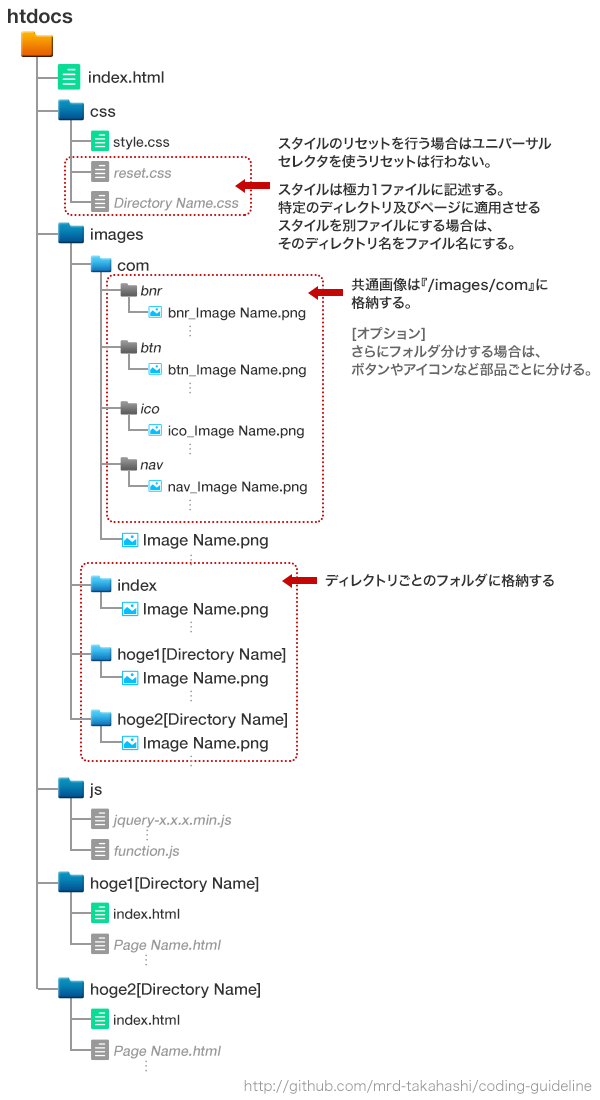
<style>
.page{position:relative;width:600px;height:1100px;background:#ffffff}
.page>*{position:absolute;margin:0}
.t1{font:20px "HelveticaNeue-Bold";color:#333333}
.t2{font:16px "HelveticaNeue-Medium";color:#333333}
.t3{font:14px "HelveticaNeue-Medium";color:#333333}
.t4{font:14px/18px "HiraKakuPro-W6";color:#333333}
.t5{font:14px "HelveticaNeue-Medium";color:#999999;font-style:italic}
.t6{font:14px "HelveticaNeue-Medium";color:#333333;font-style:italic}
.t7{font:14px "HiraKakuPro-W3";color:#999999}
.t8{font:14px/18px "HiraKakuPro-W6";color:#666666}
.t9{font:14px "HiraKakuPro-W6";color:#333333}
</style>
<div class="page">
<p class="t1" style="left:8px;top:8px;width:65px;height:16px">htdocs</p>
<p class="t2" style="left:89px;top:71px;width:75px;height:12px">index.html</p>
<p class="t2" style="left:90px;top:108px;width:26px;height:9px">css</p>
<p class="t3" style="left:113px;top:136px;width:57px;height:14px">style.css</p>
<p class="t4" style="left:278px;top:137px;width:274px;height:31px">スタイルのリセットを行う場合はユニバーサル<br>セレクタを使うリセットは行わない。</p>
<p class="t5" style="left:114px;top:168px;width:58px;height:10px">reset.css</p>
<p class="t4" style="left:278px;top:183px;width:262px;height:67px">スタイルは極力1ファイルに記述する。<br>特定のディレクトリ及びページに適用させる<br>スタイルを別ファイルにする場合は、<br>そのディレクトリ名をファイル名にする。</p>
<p class="t5" style="left:114px;top:197px;width:125px;height:14px">Directory Name.css</p>
<p class="t2" style="left:91px;top:228px;width:52px;height:15px">images</p>
<p class="t2" style="left:117px;top:262px;width:32px;height:9px">com</p>
<p class="t4" style="left:351px;top:277px;width:197px;height:32px">共通画像は『/images/com』に<br>格納する。</p>
<p class="t6" style="left:140px;top:285px;width:23px;height:11px">bnr</p>
<p class="t3" style="left:168px;top:307px;width:138px;height:14px">bnr_Image Name.png</p>
<p class="t7" style="left:189px;top:325px;width:2px;height:12px">…</p>
<p class="t8" style="left:351px;top:327px;width:240px;height:49px">[オプション]<br>さらにフォルダ分けする場合は、<br>ボタンやアイコンなど部品ごとに分ける。</p>
<p class="t6" style="left:140px;top:342px;width:21px;height:11px">btn</p>
<p class="t3" style="left:168px;top:364px;width:138px;height:14px">btn_Image Name.png</p>
<p class="t7" style="left:189px;top:382px;width:2px;height:12px">…</p>
<p class="t6" style="left:140px;top:403px;width:20px;height:11px">ico</p>
<p class="t3" style="left:168px;top:425px;width:136px;height:14px">ico_Image Name.png</p>
<p class="t7" style="left:189px;top:443px;width:2px;height:12px">…</p>
<p class="t6" style="left:140px;top:462px;width:24px;height:8px">nav</p>
<p class="t3" style="left:168px;top:481px;width:139px;height:14px">nav_Image Name.png</p>
<p class="t7" style="left:189px;top:499px;width:2px;height:12px">…</p>
<p class="t2" style="left:144px;top:534px;width:124px;height:15px">Image Name.png</p>
<p class="t7" style="left:190px;top:554px;width:2px;height:12px">…</p>
<p class="t2" style="left:118px;top:579px;width:39px;height:12px">index</p>
<p class="t9" style="left:325px;top:573px;width:229px;height:14px">ディレクトリごとのフォルダに格納する</p>
<p class="t2" style="left:144px;top:603px;width:124px;height:15px">Image Name.png</p>
<p class="t7" style="left:190px;top:621px;width:2px;height:12px">…</p>
<p class="t2" style="left:118px;top:648px;width:168px;height:15px">hoge1[Directory Name]</p>
<p class="t2" style="left:144px;top:672px;width:124px;height:15px">Image Name.png</p>
<p class="t7" style="left:190px;top:690px;width:2px;height:12px">…</p>
<p class="t2" style="left:118px;top:713px;width:169px;height:15px">hoge2[Directory Name]</p>
<p class="t2" style="left:144px;top:737px;width:124px;height:15px">Image Name.png</p>
<p class="t7" style="left:190px;top:755px;width:2px;height:12px">…</p>
<p class="t2" style="left:89px;top:783px;width:13px;height:15px">js</p>
<p class="t5" style="left:112px;top:814px;width:120px;height:14px">jquery-x.x.x.min.js</p>
<p class="t7" style="left:146px;top:829px;width:2px;height:12px">…</p>
<p class="t5" style="left:114px;top:845px;width:66px;height:14px">function.js</p>
<p class="t2" style="left:91px;top:877px;width:168px;height:15px">hoge1[Directory Name]</p>
<p class="t3" style="left:114px;top:908px;width:66px;height:11px">index.html</p>
<p class="t5" style="left:114px;top:939px;width:107px;height:14px">Page Name.html</p>
<p class="t7" style="left:145px;top:954px;width:2px;height:12px">…</p>
<p class="t2" style="left:91px;top:983px;width:169px;height:15px">hoge2[Directory Name]</p>
<p class="t3" style="left:114px;top:1014px;width:66px;height:11px">index.html</p>
<p class="t5" style="left:114px;top:1045px;width:107px;height:14px">Page Name.html</p>
<p class="t7" style="left:145px;top:1060px;width:2px;height:12px">…</p>
<p class="t7" style="left:244px;top:1080px;width:348px;height:14px">http://github.com/mrd-takahashi/coding-guideline</p>
</div>
